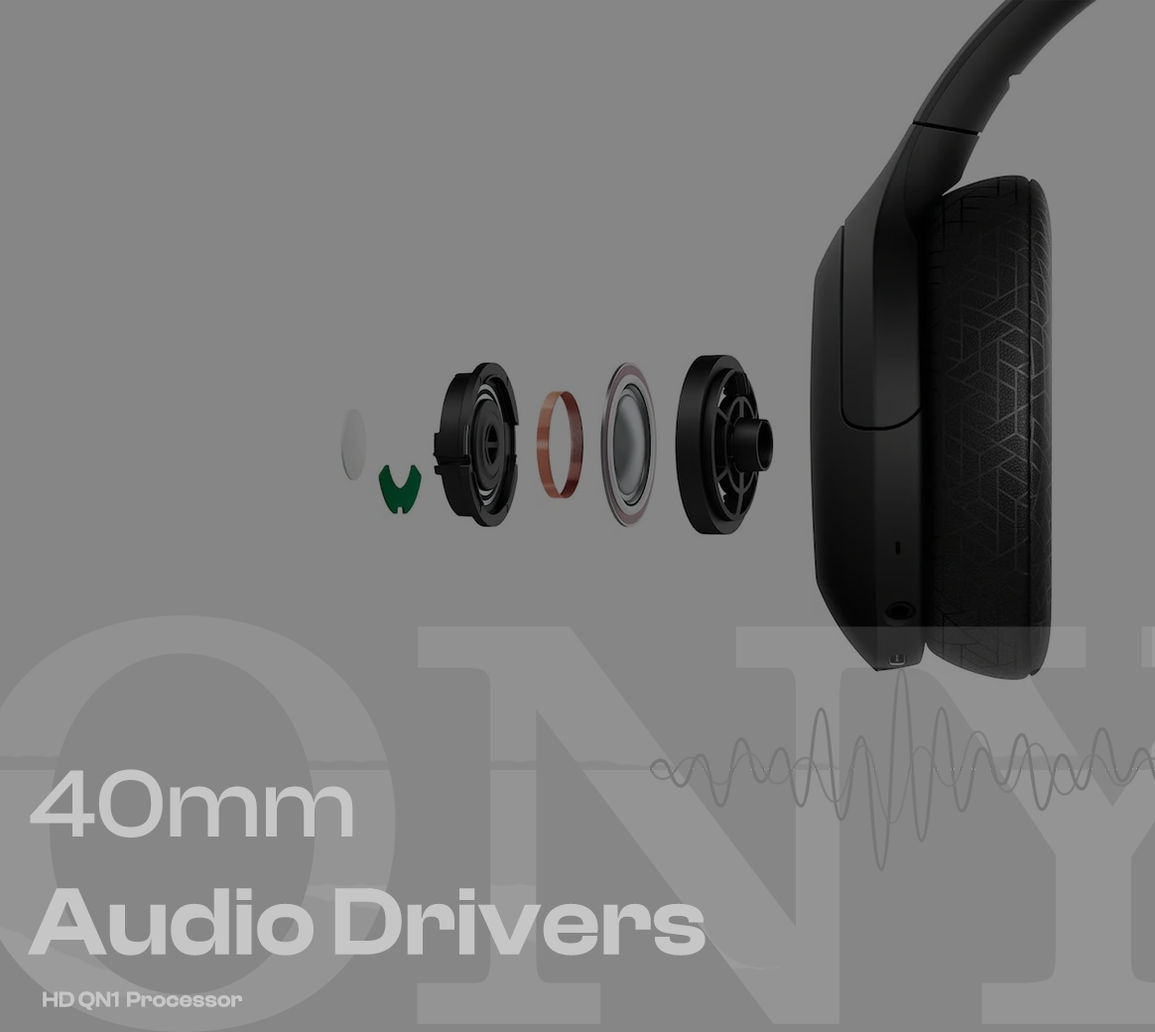
<style>
.page{position:relative;width:1155px;height:1032px;background:#868686}
.page>*{position:absolute;margin:0}
.t1{font:98.2px "ClashDisplayVariable-Semibold";color:#c6c6c6}
.t2{font:98.2px "ClashDisplayVariable-Medium";color:#c6c6c6}
.t3{font:22.1px "ClashDisplayVariable-Semibold";color:#c6c6c6}
</style>
<div class="page">
<p class="t1" style="left:28px;top:769px;width:678px;height:187px"><span class="t2">40mm<br></span>Audio Drivers</p>
<p class="t3" style="left:43px;top:991px;width:199px;height:19px">HD QN1  Processor</p>
</div>
